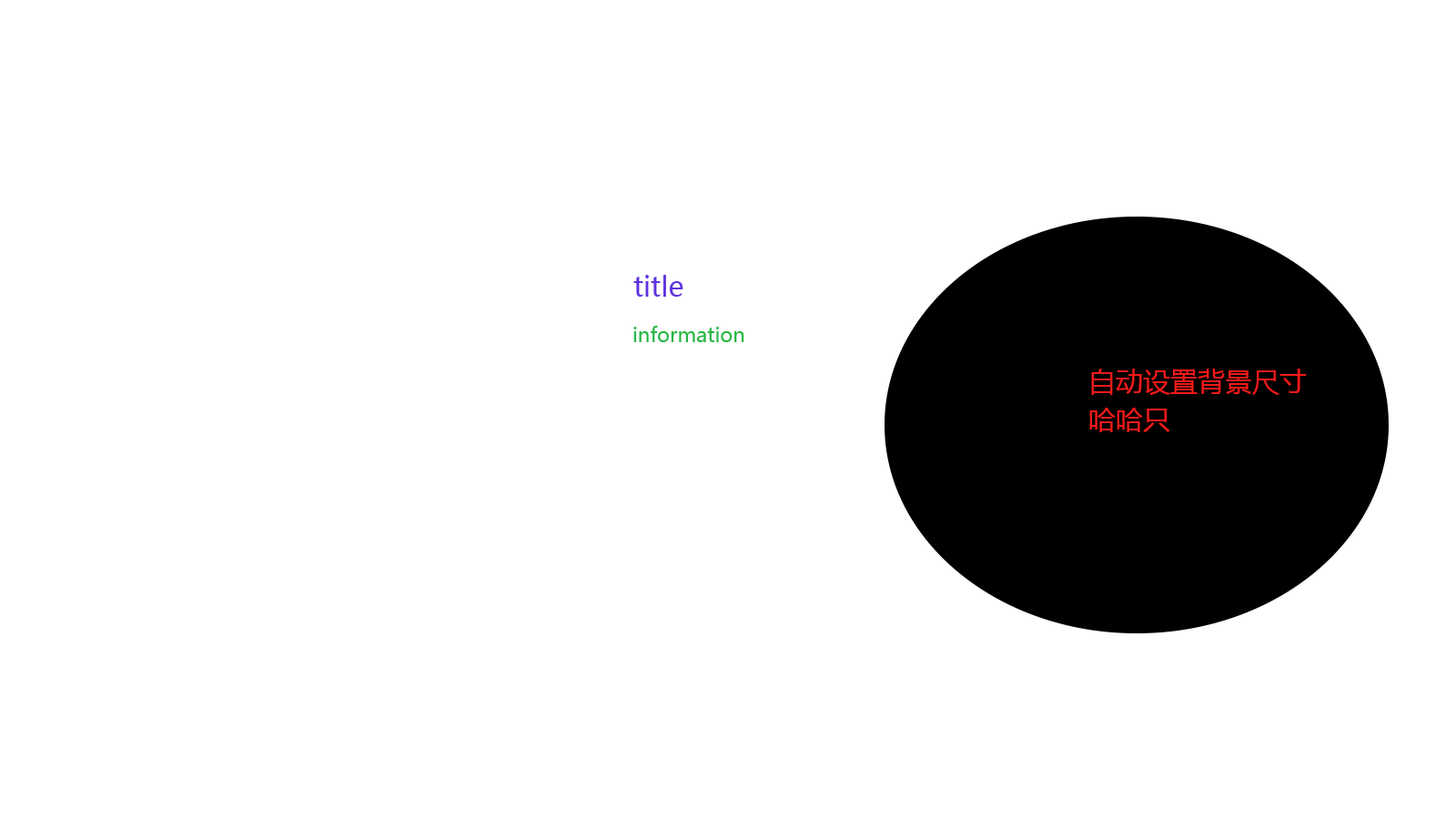
<style>
.page{position:relative;width:1456px;height:819px;background:#ffffff}
.page>*{position:absolute;margin:0}
.t1{font:27.3px "MicrosoftYaHei";color:#5f33df}
.t2{font:20px "MicrosoftYaHei";color:#28b743}
.t3{font:27.3px/12.7px "MicrosoftYaHei";color:#f21a1a}
</style>
<div class="page">
<p class="t1" style="left:633px;top:275px;width:50px;height:22px">title</p>
<p class="t2" style="left:633px;top:326px;width:111px;height:16px">information</p>
<p class="t3" style="left:1089px;top:369px;width:218px;height:63px">自动设置背景尺寸<br><br><br>哈哈只</p>
</div>
